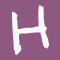
<style>
.page{position:relative;width:60px;height:60px;background:#8e5880}
.page>*{position:absolute;margin:0}
.t1{font:60px "AxureHandwriting";color:#f7f7f7}
</style>
<div class="page">
<p class="t1" style="left:12px;top:5px;width:37px;height:50px">H</p>
</div>
